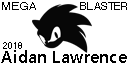
<style>
.page{position:relative;width:128px;height:64px;background:#ffffff}
.page>*{position:absolute;margin:0}
.t1{font:10.8px "Helvetica";color:#000000;scale:1.08 1}
.t2{font:10.5px "Helvetica";color:#000000}
.t3{font:17.4px "SegoeUI-Semibold";color:#000000}
.t4{font:9.7px "Helvetica";color:#000000;scale:0.9 1}
</style>
<div class="page">
<p class="t1" style="left:2px;top:2px;width:34px;height:8px">MEGA</p>
<p class="t2" style="left:80px;top:2px;width:47px;height:8px">BLASTER</p>
<p class="t3" style="left:1px;top:50px;width:126px;height:13px">Aidan Lawrence</p>
<p class="t4" style="left:3px;top:42px;width:19px;height:7px">2018</p>
</div>
